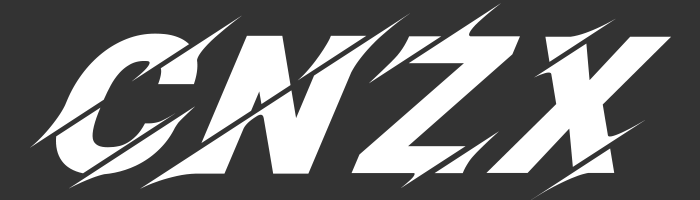
<style>
.page{position:relative;width:700px;height:200px;background:#333333}
.page>*{position:absolute;margin:0}
.t1{font:191.7px "Facon";color:#ffffff;font-style:italic}
</style>
<div class="page">
<p class="t1" style="left:30px;top:3px;width:641px;height:198px">CNZX</p>
</div>
